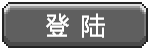
<style>
.page{position:relative;width:150px;height:50px;background:#5f5f5f}
.page>*{position:absolute;margin:0}
.t1{font:24px "FZXS24--GB1-0";color:#ffffff}
</style>
<div class="page">
<p class="t1" style="left:46px;top:13px;width:59px;height:25px">登 陆</p>
</div>
